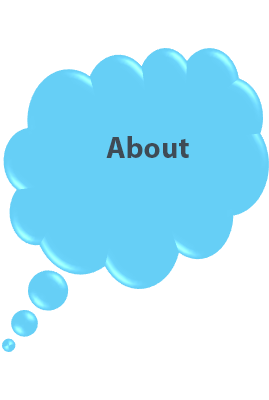
<style>
.page{position:relative;width:269px;height:400px;background:#ffffff}
.page>*{position:absolute;margin:0}
.t1{font:30px "MyriadPro-Bold";color:#3f4b55}
</style>
<div class="page">
<p class="t1" style="left:106px;top:136px;width:83px;height:22px">About</p>
</div>
